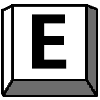
<style>
.page{position:relative;width:100px;height:100px;background:#ffffff}
.page>*{position:absolute;margin:0}
.t1{font:70.2px "AdobeGothicStd-Bold";color:#000000;font-weight:bold;scale:1.11 1}
</style>
<div class="page">
<p class="t1" style="left:32px;top:14px;width:35px;height:55px">E</p>
</div>
